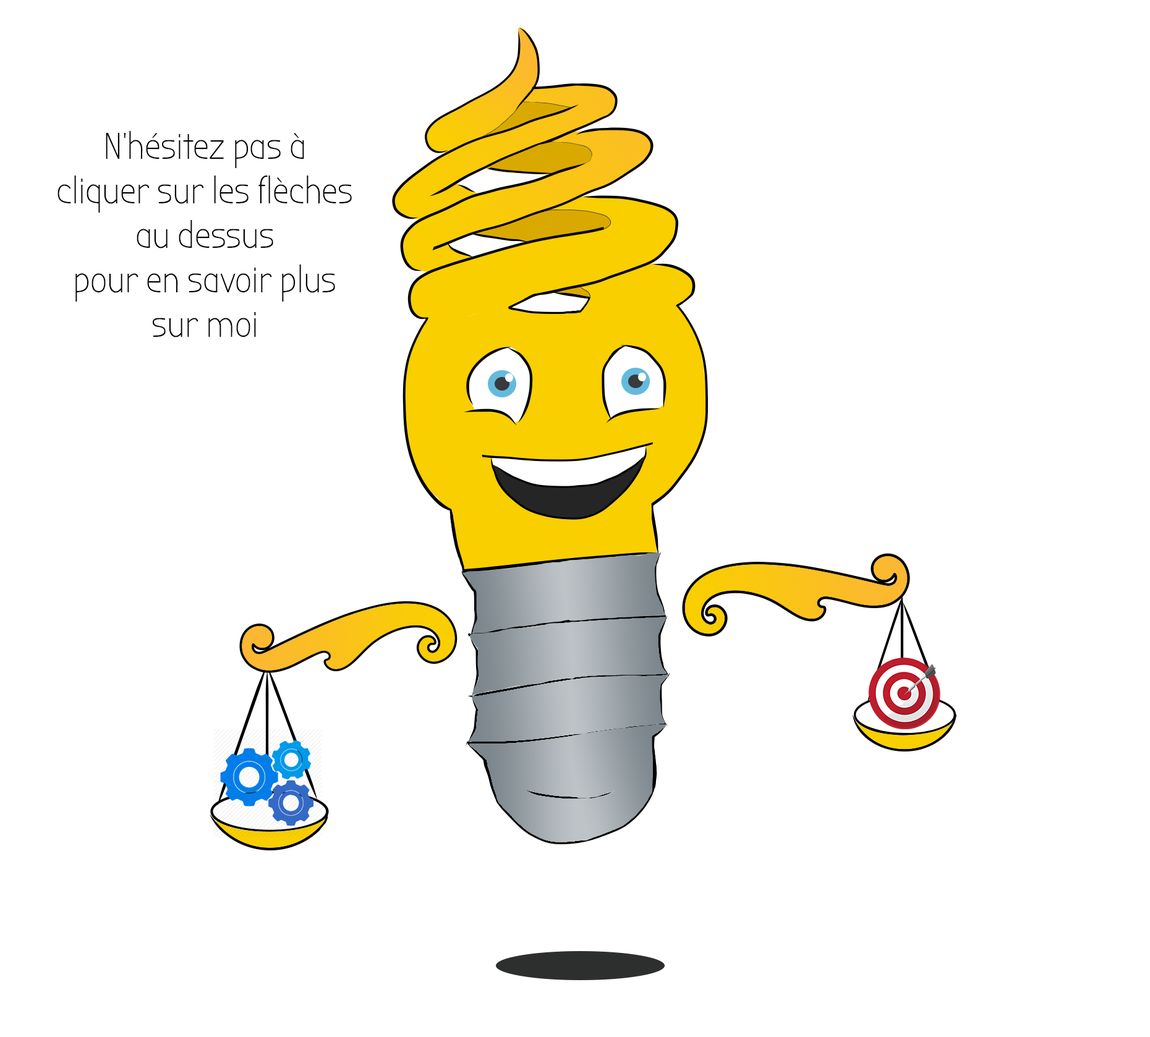
<style>
.page{position:relative;width:1150px;height:1037px;background:#ffffff}
.page>*{position:absolute;margin:0}
.t1{font:37.1px "BubblerOne";color:#000000}
</style>
<div class="page">
<p class="t1" style="left:57px;top:131px;width:295px;height:206px;text-align:center">N’hésitez pas à cliquer sur les flèches<br>au dessus<br>pour en savoir plus sur moi</p>
</div>
